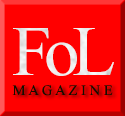
<style>
.page{position:relative;width:125px;height:116px;background:#ff0000}
.page>*{position:absolute;margin:0}
.t1{font:70.8px "TimesNewRomanPSMT";letter-spacing:-0.1em;color:#fbf8f8}
.t2{font:70.8px "TimesNewRomanPSMT";letter-spacing:-0.075em;color:#fbf8f8}
.t3{font:14.6px "TimesNewRomanPSMT";color:#120e00}
</style>
<div class="page">
<p class="t1" style="left:13px;top:28px;width:101px;height:48px">Fo<span class="t2">L</span></p>
<p class="t3" style="left:12px;top:85px;width:101px;height:11px">M A G A Z I N E</p>
</div>
